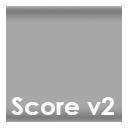
<style>
.page{position:relative;width:128px;height:128px;background:#a7a7a7}
.page>*{position:absolute;margin:0}
.t1{font:25px "CenturyGothic-Bold";color:#ffffff}
</style>
<div class="page">
<p class="t1" style="left:11px;top:97px;width:103px;height:18px">Score v2</p>
</div>
